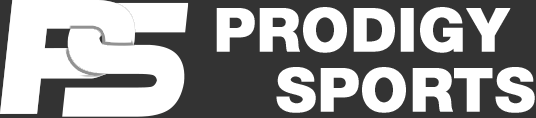
<style>
.page{position:relative;width:536px;height:118px;background:#333333}
.page>*{position:absolute;margin:0}
.t1{font:60px/60px "HelveticaNeueLTStd-Hv";letter-spacing:0.005em;color:#ffffff;text-transform:uppercase;font-weight:bold}
</style>
<div class="page">
<p class="t1" style="left:216px;top:7px;width:319px;height:106px">Prodigy <br>   Sports</p>
</div>
